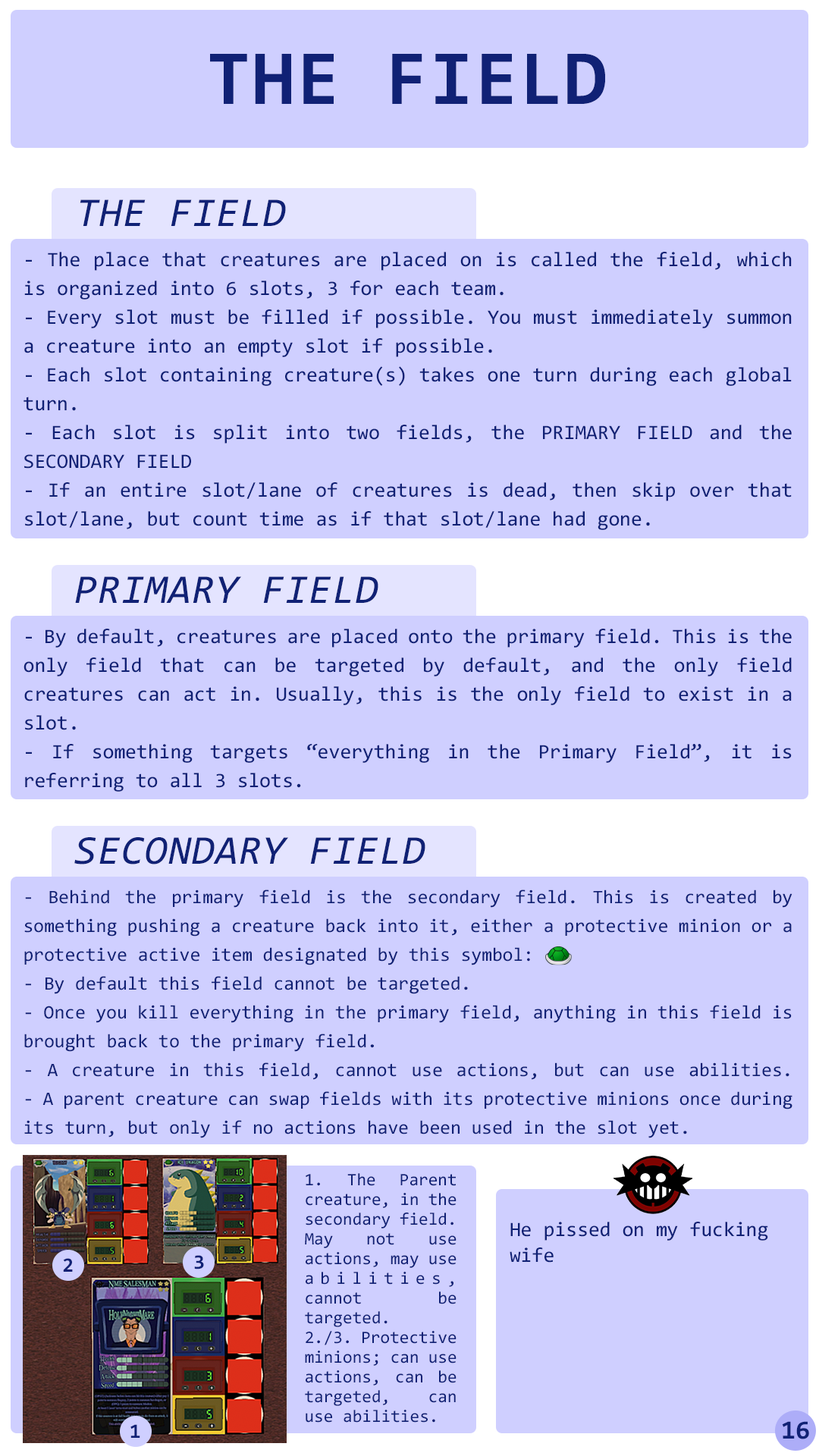
<style>
.page{position:relative;width:819px;height:1456px;background:#cfcfff}
.page>*{position:absolute;margin:0}
.t1{font:78.3px "Consolas-Bold";letter-spacing:0.02em;color:#102175}
.t2{font:41.1px "Consolas-Italic";letter-spacing:0.02em;color:#102175}
.t3{font:20.5px/28.8px "Consolas";color:#102175}
.t4{font:19px/28.8px "Consolas";color:#102175}
.t5{font:19px/28.8px "stoogedings-Regular";color:#102175}
.t6{font:17.4px/19.7px "Consolas";color:#102175}
.t7{font:20.5px/25.8px "Consolas";color:#102175}
.t8{font:20.5px "Consolas-Bold";color:#102175}
.t9{font:26.4px "Consolas-Bold";color:#102175}
</style>
<div class="page">
<p class="t1" style="left:210px;top:54px;width:395px;height:50px">THE FIELD</p>
<p class="t2" style="left:80px;top:199px;width:206px;height:27px">THE FIELD</p>
<p class="t3" style="left:24px;top:252px;width:768px;height:278px;text-align:justify">- The place that creatures are placed on is called the field, which is organized into 6 slots, 3 for each team.<br>- Every slot must be filled if possible. You must immediately summon a creature into an empty slot if possible.<br>- Each slot containing creature(s) takes one turn during each global turn.<br>- Each slot is split into two fields, the PRIMARY FIELD and the SECONDARY FIELD<br>- If an entire slot/lane of creatures is dead, then skip over that slot/lane, but count time as if that slot/lane had gone.</p>
<p class="t2" style="left:75px;top:576px;width:303px;height:27px">PRIMARY FIELD</p>
<p class="t3" style="left:24px;top:629px;width:768px;height:163px;text-align:justify">- By default, creatures are placed onto the primary field. This is the only field that can be targeted by default, and the only field creatures can act in. Usually, this is the only field to exist in a slot.<br>- If something targets “everything in the Primary Field”, it is referring to all 3 slots.</p>
<p class="t2" style="left:74px;top:837px;width:351px;height:27px">SECONDARY FIELD</p>
<p class="t4" style="left:24px;top:890px;width:768px;height:248px;text-align:justify">- Behind the primary field is the secondary field. This is created by something pushing a creature back into it, either a protective minion or a protective active item designated by this symbol: <span class="t5">[defensive_minion]</span><br>- By default this field cannot be targeted.<br>- Once you kill everything in the primary field, anything in this field is brought back to the primary field.<br>- A creature in this field, cannot use actions, but can use abilities.<br>- A parent creature can swap fields with its protective minions once during its turn, but only if no actions have been used in the slot yet.</p>
<p class="t6" style="left:305px;top:1173px;width:152px;height:250px;text-align:justify">1. The Parent creature, in the secondary field. May not use actions, may use abilities, cannot be targeted.<br>2./3. Protective minions; can use actions, can be targeted, can use abilities.</p>
<p class="t7" style="left:510px;top:1222px;width:258px;height:41px">He pissed on my fucking wife</p>
<p class="t8" style="left:63px;top:1258px;width:10px;height:14px">2</p>
<p class="t8" style="left:194px;top:1255px;width:10px;height:14px">3</p>
<p class="t9" style="left:782px;top:1421px;width:27px;height:18px">16</p>
<p class="t8" style="left:130px;top:1424px;width:10px;height:14px">1</p>
</div>
